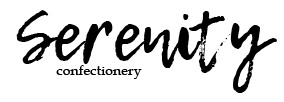
<style>
.page{position:relative;width:284px;height:102px;background:#ffffff}
.page>*{position:absolute;margin:0}
.t1{font:72px "LemonTuesday";letter-spacing:0.005em;color:#000000}
.t2{font:14px "BookAntiqua";letter-spacing:0.005em;color:#000000}
</style>
<div class="page">
<p class="t1" style="left:16px;top:10px;width:261px;height:83px">Serenity</p>
<p class="t2" style="left:56px;top:65px;width:86px;height:14px">confectionery</p>
</div>
